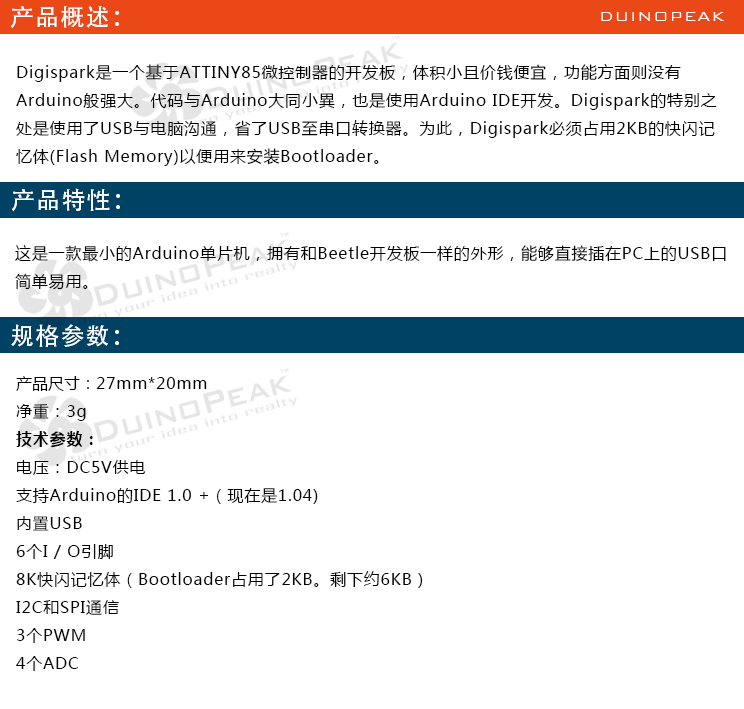
<style>
.page{position:relative;width:744px;height:709px;background:#ffffff}
.page>*{position:absolute;margin:0}
.t1{font:24px "AdobeHeitiStd-Regular";letter-spacing:0.05em;color:#ffffff}
.t2{font:18px "BankGothicBT-Light";letter-spacing:0.05em;color:#ffffff}
.t3{font:16px "MicrosoftYaHei";letter-spacing:0.05em;color:#000000}
.t4{font:16px "MicrosoftYaHei";color:#000000}
.t5{font:16px "MicrosoftYaHei-Bold";letter-spacing:0.05em;color:#000000}
</style>
<div class="page">
<p class="t1" style="left:10px;top:6px;width:109px;height:23px">产品概述：</p>
<p class="t2" style="left:601px;top:12px;width:124px;height:9px">DUINOPEAK</p>
<p class="t3" style="left:16px;top:64px;width:701px;height:102px">Digispark是一个基于ATTINY85微控制器的开发板，体积小且价钱便宜，功能方面则没有<br>Arduino般强大。代码与Arduino大同小異，也是使用Arduino IDE开发。Digispark的特别之<br>处是使用了USB与电脑沟通，省了USB至串口转换器。为此，Digispark必须占用2KB的快闪记<br>忆体(Flash Memory)以便用来安装Bootloader。</p>
<p class="t1" style="left:11px;top:188px;width:109px;height:24px">产品特性：</p>
<p class="t3" style="left:15px;top:245px;width:711px;height:45px">这是一款最小的Arduino单片机，拥有和Beetle开发板一样的外形，能够直接插在PC上的USB口<br>简单易用。</p>
<p class="t1" style="left:11px;top:324px;width:108px;height:23px">规格参数：</p>
<p class="t3" style="left:16px;top:376px;width:407px;height:295px"><span class="t4">产品尺寸：</span>27mm*20mm<br>净重：3g<br><span class="t5">技术参数：<br></span>电压：DC5V供电<br>支持Arduino的IDE 1.0 +（现在是1.04)<br>内置USB<br>6个I / O引脚<br>8K快闪记忆体（Bootloader占用了2KB。剩下约6KB）<br>I2C和SPI通信<br>3个PWM<br>4个ADC</p>
</div>
